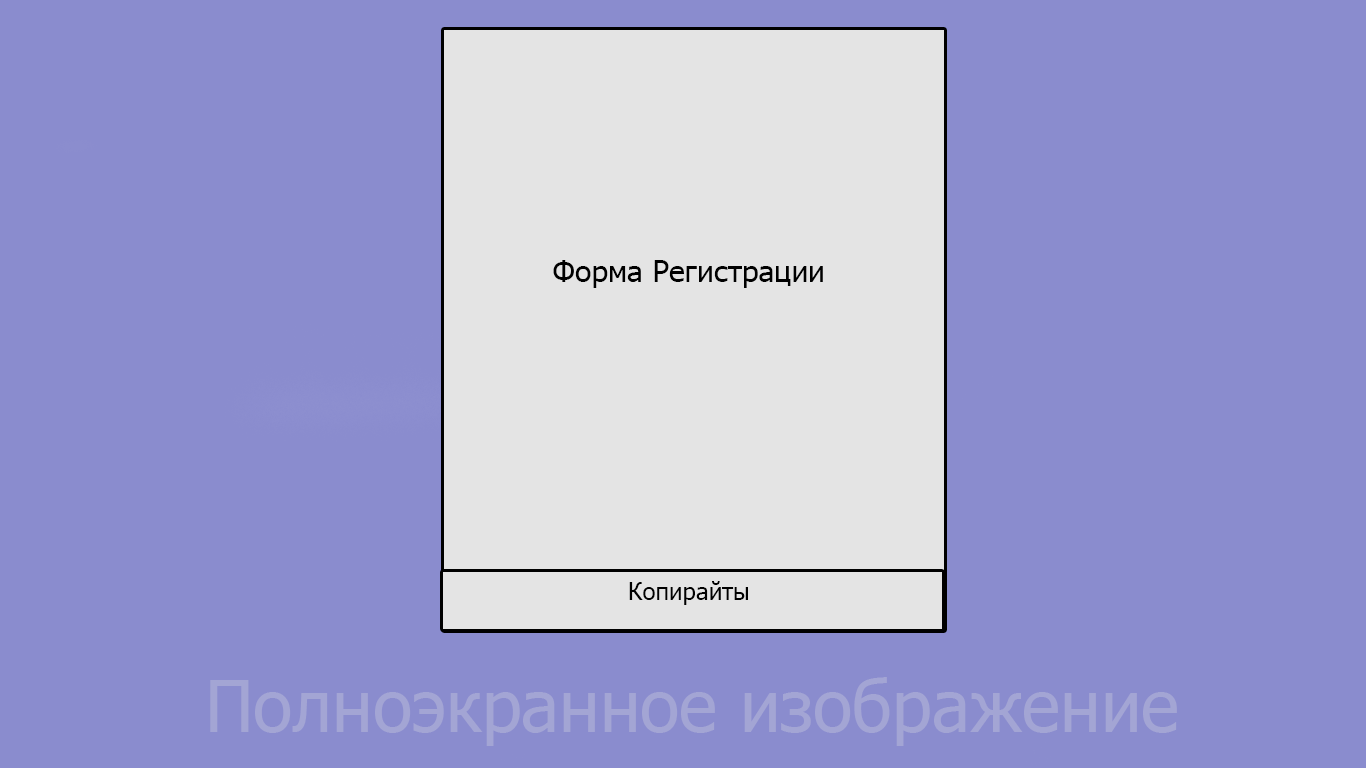
<style>
.page{position:relative;width:1366px;height:768px;background:#8a8cce}
.page>*{position:absolute;margin:0}
.t1{font:30px "Tahoma";color:#000000}
.t2{font:24px "Tahoma";color:#000000}
</style>
<div class="page">
<p class="t1" style="left:553px;top:260px;width:270px;height:28px">Форма Регистрации</p>
<p class="t2" style="left:629px;top:581px;width:119px;height:24px">Копирайты</p>
</div>
